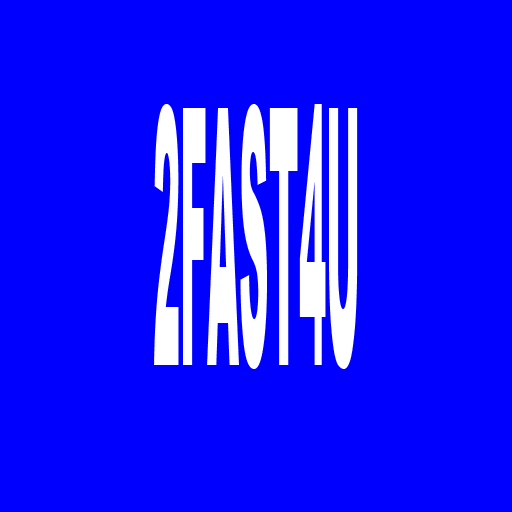
<style>
.page{position:relative;width:512px;height:512px;background:#0000ff}
.page>*{position:absolute;margin:0}
.t1{font:358.9px "Arial-Black";color:#ffffff;scale:0.11 1}
</style>
<div class="page">
<p class="t1" style="left:154px;top:104px;width:204px;height:265px">2FAST4U</p>
</div>
